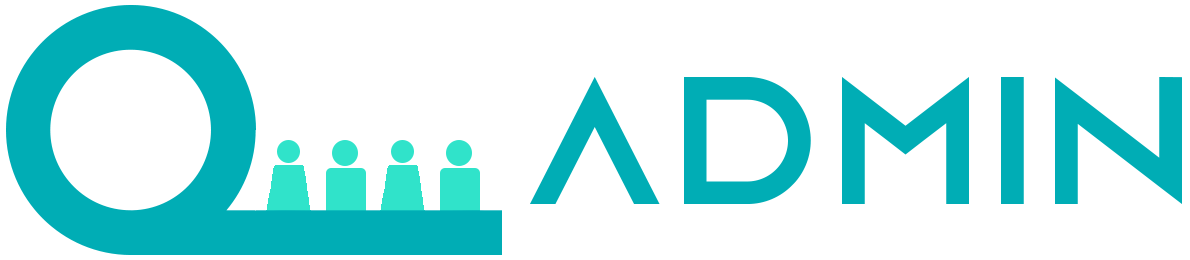
<style>
.page{position:relative;width:1190px;height:260px;background:#ffffff}
.page>*{position:absolute;margin:0}
.t1{font:357.5px "AzonixRegular";color:#00adb5}
.t2{font:181.2px "AzonixRegular";letter-spacing:0.075em;color:#00adb5}
</style>
<div class="page">
<p class="t1" style="left:6px;top:4px;width:250px;height:251px">Q</p>
<p class="t2" style="left:529px;top:76px;width:653px;height:128px">Admin</p>
</div>
